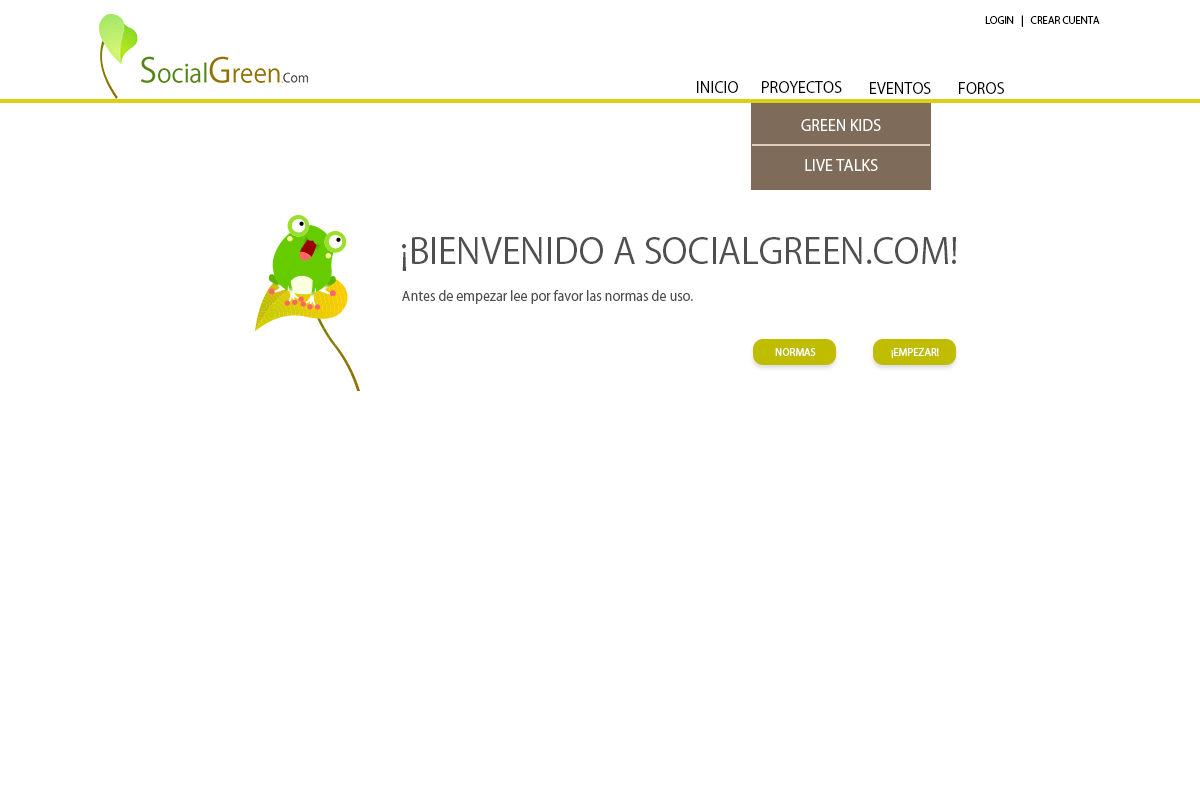
<style>
.page{position:relative;width:1200px;height:800px;background:#ffffff}
.page>*{position:absolute;margin:0}
.t1{font:10px "KozGoPr6N-Regular";color:#000000}
.t2{font:15px "KozGoPr6N-Regular";color:#000000}
.t3{font:15px "KozGoPr6N-Regular";color:#ffffff}
.t4{font:35px "KozGoPr6N-Regular";color:#4f4f4f}
.t5{font:13px "KozGoPr6N-Regular";color:#4f4f4f}
.t6{font:10px "KozGoPr6N-Regular";color:#ffffff}
</style>
<div class="page">
<p class="t1" style="left:985px;top:15px;width:115px;height:12px">LOGIN   |   CREAR CUENTA</p>
<p class="t2" style="left:697px;top:81px;width:41px;height:12px">INICIO</p>
<p class="t2" style="left:762px;top:81px;width:80px;height:12px">PROYECTOS</p>
<p class="t2" style="left:870px;top:82px;width:61px;height:12px">EVENTOS</p>
<p class="t2" style="left:959px;top:82px;width:45px;height:12px">FOROS</p>
<p class="t3" style="left:801px;top:119px;width:80px;height:12px">GREEN KIDS</p>
<p class="t3" style="left:805px;top:159px;width:73px;height:12px">LIVE TALKS</p>
<p class="t4" style="left:402px;top:237px;width:554px;height:34px">¡BIENVENIDO A SOCIALGREEN.COM!</p>
<p class="t5" style="left:402px;top:290px;width:291px;height:14px">Antes de empezar lee por favor las normas de uso.</p>
<p class="t6" style="left:775px;top:348px;width:41px;height:8px">NORMAS</p>
<p class="t6" style="left:891px;top:348px;width:48px;height:10px">¡EMPEZAR!</p>
</div>
